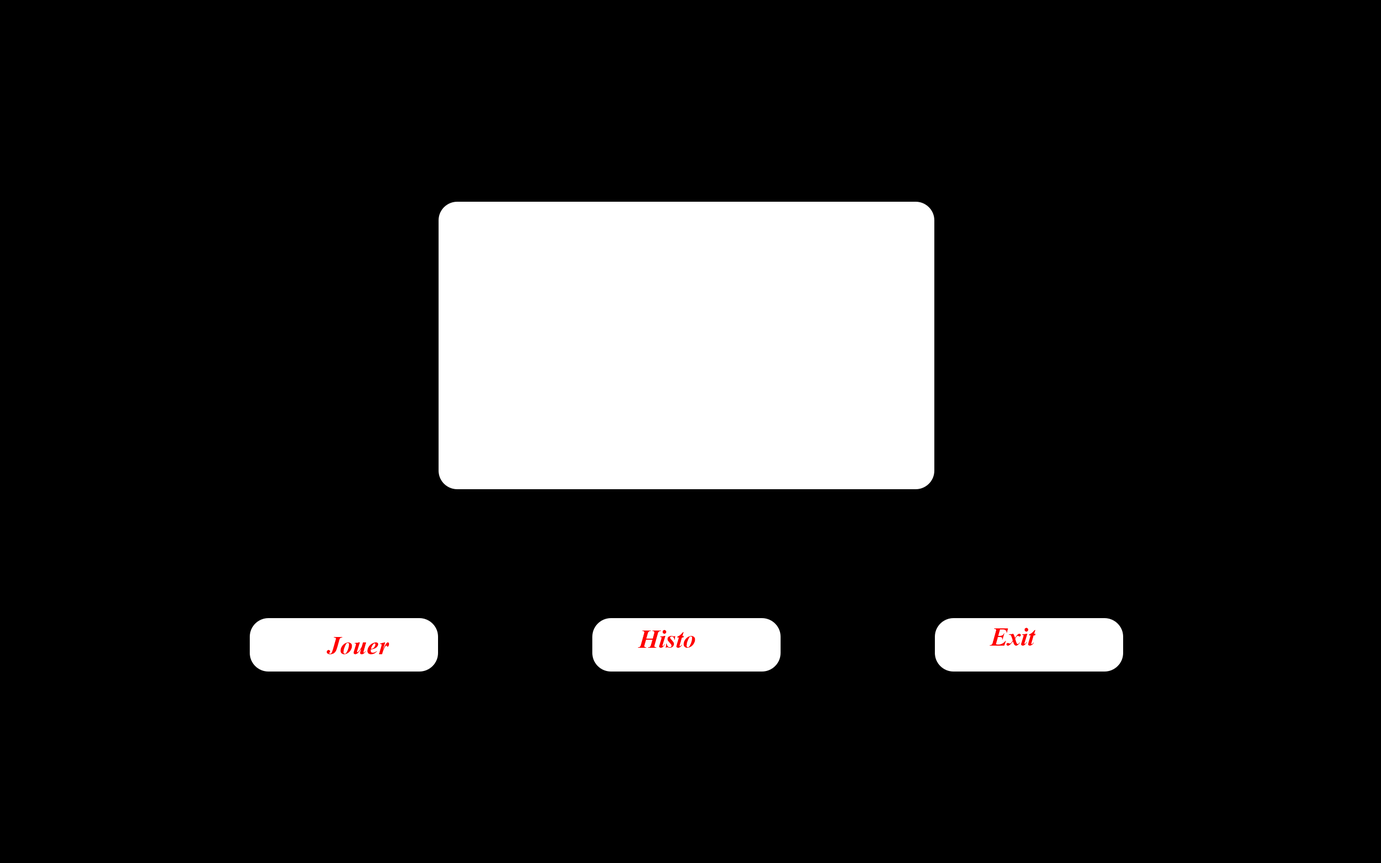
<style>
.page{position:relative;width:1381px;height:863px;background:#000000}
.page>*{position:absolute;margin:0}
.t1{font:25.9px "TimesNewRomanPS-BoldItalicMT";color:#ff0000}
</style>
<div class="page">
<p class="t1" style="left:990px;top:628px;width:46px;height:18px">Exit</p>
<p class="t1" style="left:326px;top:637px;width:64px;height:17px">Jouer</p>
<p class="t1" style="left:638px;top:630px;width:57px;height:18px">Histo</p>
</div>
